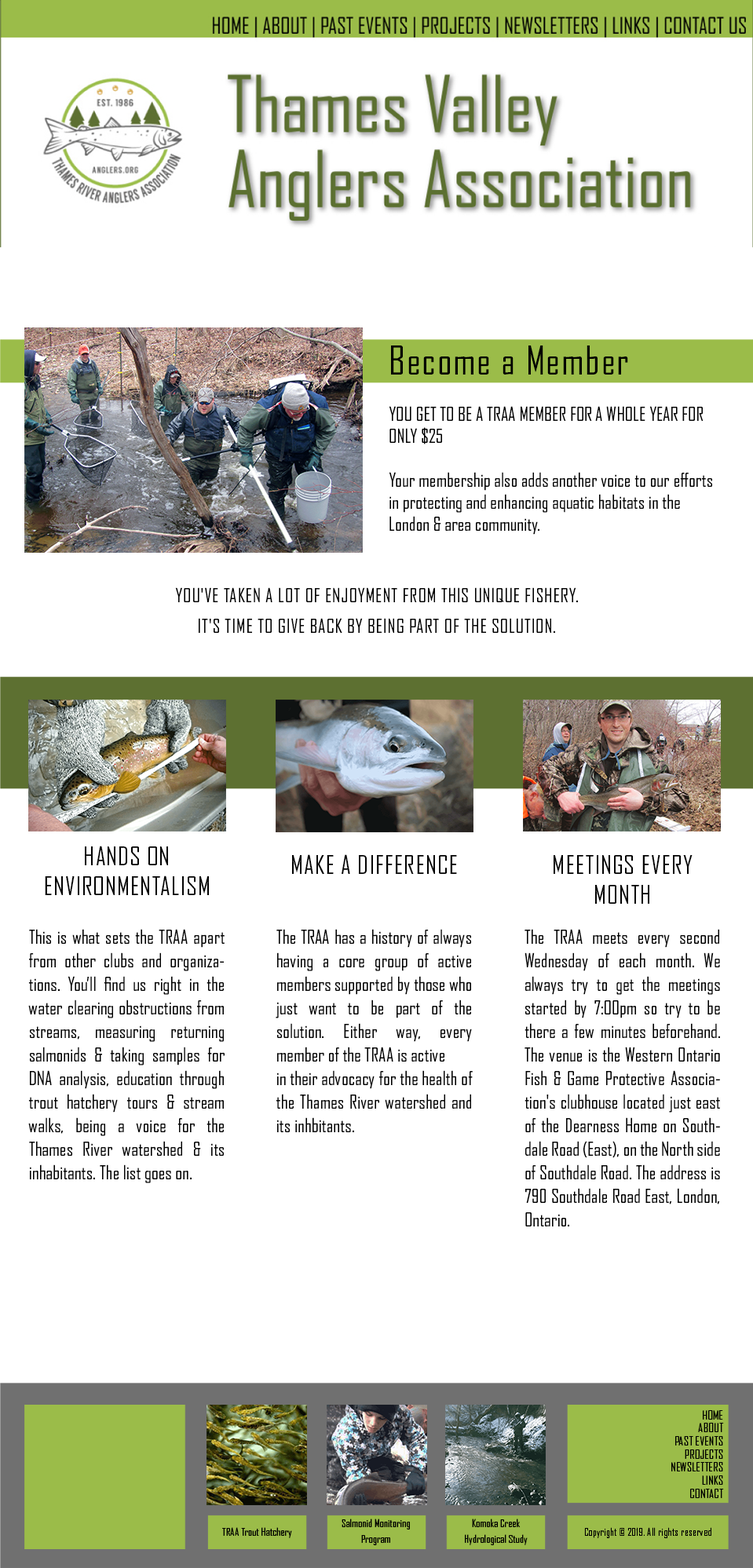
<style>
.page{position:relative;width:753px;height:1568px;background:#ffffff}
.page>*{position:absolute;margin:0}
.t1{font:37.9px "AgencyFB-Regular";letter-spacing:0.038em;color:#000000}
.t2{font:18.3px "AgencyFB-Regular";color:#000000}
.t3{font:18.3px/30.1px "AgencyFB-Regular";letter-spacing:0.038em;color:#000000}
.t4{font:24.8px "AgencyFB-Regular";letter-spacing:0.038em;color:#000000}
.t5{font:18.3px/23.5px "AgencyFB-Regular";color:#000000}
.t6{font:11.8px/13.1px "AgencyFB-Regular";letter-spacing:0.01em;color:#000000}
.t7{font:10.5px "AgencyFB-Regular";letter-spacing:0.01em;color:#000000}
.t8{font:10.5px/15.7px "AgencyFB-Regular";letter-spacing:0.01em;color:#000000}
.t9{font:10.5px "AgencyFB-Regular";letter-spacing:0.038em;color:#000000;scale:0.93 1}
</style>
<div class="page">
<p class="t1" style="left:391px;top:345px;width:237px;height:30px">Become a Member</p>
<p class="t2" style="left:389px;top:406px;width:323px;height:129px">YOU GET TO BE A TRAA MEMBER FOR A WHOLE YEAR FOR ONLY $25<br><br>Your membership also adds another voice to our efforts in protecting and enhancing aquatic habitats in the London &amp; area community.</p>
<p class="t3" style="left:175px;top:587px;width:403px;height:46px;text-align:center">YOU'VE TAKEN A LOT OF ENJOYMENT FROM THIS UNIQUE FISHERY.<br>IT'S TIME TO GIVE BACK BY BEING PART OF THE SOLUTION.</p>
<p class="t4" style="left:45px;top:846px;width:164px;height:49px;text-align:center">HANDS ON<br>ENVIRONMENTALISM</p>
<p class="t4" style="left:292px;top:854px;width:165px;height:20px">MAKE A DIFFERENCE</p>
<p class="t4" style="left:554px;top:855px;width:139px;height:49px;text-align:center">MEETINGS EVERY<br>MONTH</p>
<p class="t5" style="left:28px;top:929px;width:197px;height:254px;text-align:justify">This is what sets the TRAA apart from other clubs and organizations. You’ll find us right in the water clearing obstructions from streams, measuring returning salmonids &amp; taking samples for DNA analysis, education through trout hatchery tours &amp; stream walks, being a voice for the Thames River watershed &amp; its inhabitants. The list goes on.</p>
<p class="t5" style="left:276px;top:929px;width:197px;height:203px;text-align:justify">The TRAA has a history of always having a core group of active members supported by those who just want to be part of the solution. Either way, every member of the TRAA is active <br>in their advocacy for the health of the Thames River watershed and its inhbitants.</p>
<p class="t5" style="left:524px;top:929px;width:196px;height:297px;text-align:justify">The TRAA meets every second Wednesday of each month. We always try to get the meetings started by 7:00pm so try to be there a few minutes beforehand. The venue is the Western Ontario Fish &amp; Game Protective Association's clubhouse located just east of the Dearness Home on Southdale Road (East), on the North side of Southdale Road. The address is 790 Southdale Road East, London, Ontario.</p>
<p class="t6" style="left:671px;top:1410px;width:53px;height:88px;text-align:right">HOME<br>ABOUT<br>PAST EVENTS<br>PROJECTS<br>NEWSLETTERS<br>LINKS<br>CONTACT</p>
<p class="t7" style="left:222px;top:1527px;width:70px;height:11px">TRAA Trout Hatchery</p>
<p class="t8" style="left:342px;top:1519px;width:68px;height:26px;text-align:center">Salmonid Monitoring<br>Program</p>
<p class="t8" style="left:465px;top:1519px;width:63px;height:26px;text-align:center">Komoka Creek<br>Hydrological Study</p>
<p class="t9" style="left:584px;top:1527px;width:127px;height:11px">Copyright © 2019. All rights reserved</p>
</div>
